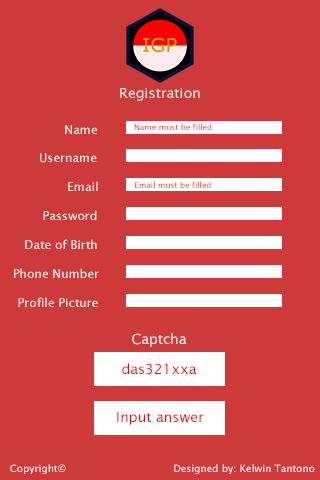
<style>
.page{position:relative;width:320px;height:480px;background:#ce3a3a}
.page>*{position:absolute;margin:0}
.t1{font:14px "LucidaSans";color:#fcf4f4}
.t2{font:12px "LucidaSans";color:#fcf4f4}
.t3{font:8px "LucidaSans"}
.t4{font:14px "LucidaSans";color:#ffffff}
.t5{font:14px "LucidaSans";color:#ff0000}
.t6{font:10px "LucidaSans";color:#ffffff}
</style>
<div class="page">
<p class="t1" style="left:120px;top:88px;width:80px;height:13px">Registration</p>
<p class="t2" style="left:65px;top:125px;width:32px;height:9px">Name</p>
<p class="t3" style="left:134px;top:123px;width:78px;height:7px">Name must be filled</p>
<p class="t2" style="left:40px;top:153px;width:57px;height:10px">Username</p>
<p class="t2" style="left:68px;top:181px;width:30px;height:10px">Email</p>
<p class="t3" style="left:135px;top:181px;width:76px;height:7px">Email must be filled</p>
<p class="t2" style="left:43px;top:210px;width:54px;height:10px">Password</p>
<p class="t2" style="left:25px;top:239px;width:72px;height:10px">Date of Birth</p>
<p class="t2" style="left:14px;top:268px;width:85px;height:10px">Phone Number</p>
<p class="t2" style="left:18px;top:297px;width:80px;height:10px">Profile Picture</p>
<p class="t4" style="left:132px;top:333px;width:55px;height:14px">Captcha</p>
<p class="t5" style="left:122px;top:363px;width:75px;height:12px">das321xxa</p>
<p class="t5" style="left:117px;top:412px;width:87px;height:13px">Input answer</p>
<p class="t6" style="left:10px;top:464px;width:56px;height:10px">Copyright©</p>
<p class="t6" style="left:174px;top:464px;width:141px;height:10px">Designed by: Kelwin Tantono</p>
</div>
